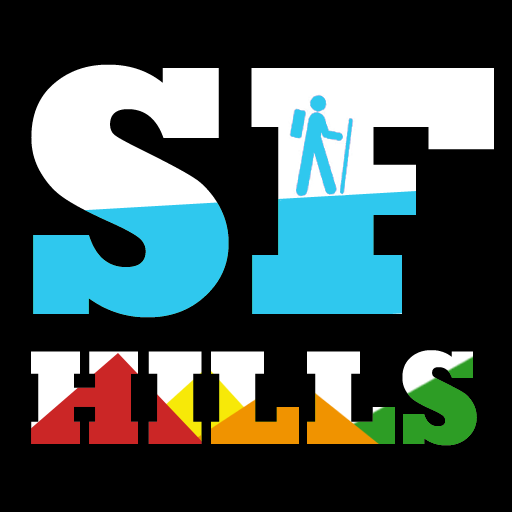
<style>
.page{position:relative;width:512px;height:512px;background:#000000}
.page>*{position:absolute;margin:0}
.t1{font:362.3px "Rockwell-ExtraBold"}
.t2{font:136.2px "Rockwell-ExtraBold"}
</style>
<div class="page">
<p class="t1" style="left:31px;top:64px;width:463px;height:254px">SF</p>
<p class="t2" style="left:31px;top:350px;width:446px;height:96px">HILLS</p>
</div>
